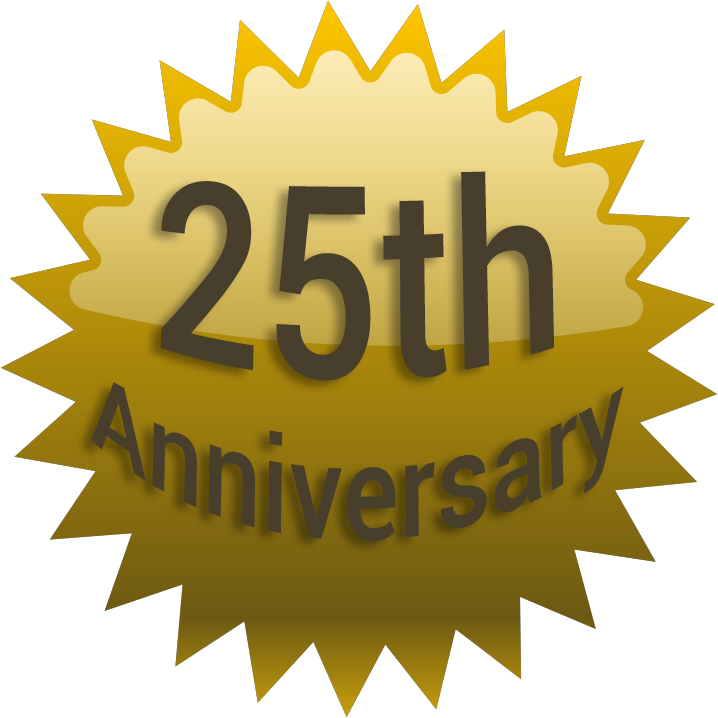
<style>
.page{position:relative;width:718px;height:718px;background:#ffffff}
.page>*{position:absolute;margin:0}
.t1{font:100px "Roboto-Medium";letter-spacing:0.001em;color:#473f2c}
.t2{font:200px "Roboto-Medium";letter-spacing:0.001em;color:#473f2c}
</style>
<div class="page">
<p class="t1" style="left:91px;top:171px;width:533px;height:371px;text-align:center"><span class="t2">25th<br></span>Anniversary</p>
</div>
